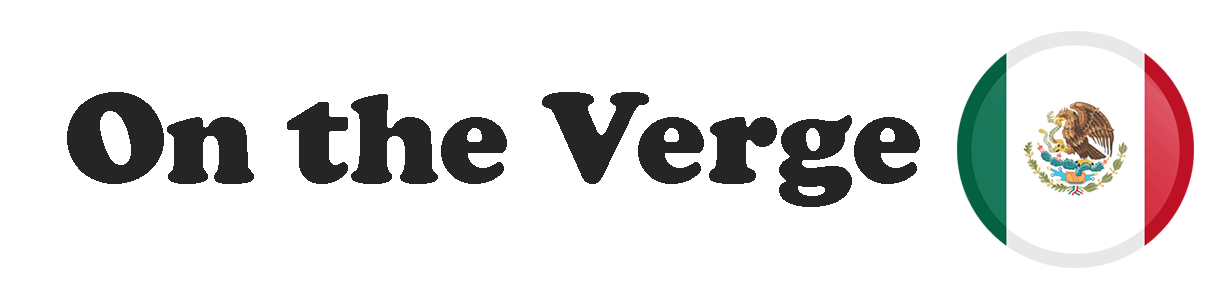
<style>
.page{position:relative;width:1220px;height:300px;background:#ffffff}
.page>*{position:absolute;margin:0}
.t1{font:132.1px "CooperBlack";color:#252525}
</style>
<div class="page">
<p class="t1" style="left:67px;top:92px;width:853px;height:115px">On the Verge</p>
</div>
